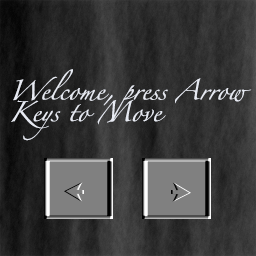
<style>
.page{position:relative;width:256px;height:256px}
.page>*{position:absolute;margin:0}
.t1{font:18px "Zapfino";color:#e7eaf2}
</style>
<div class="page">
<p class="t1" style="left:11px;top:69px;width:241px;height:72px">Welcome, press Arrow Keys to Move</p>
</div>
